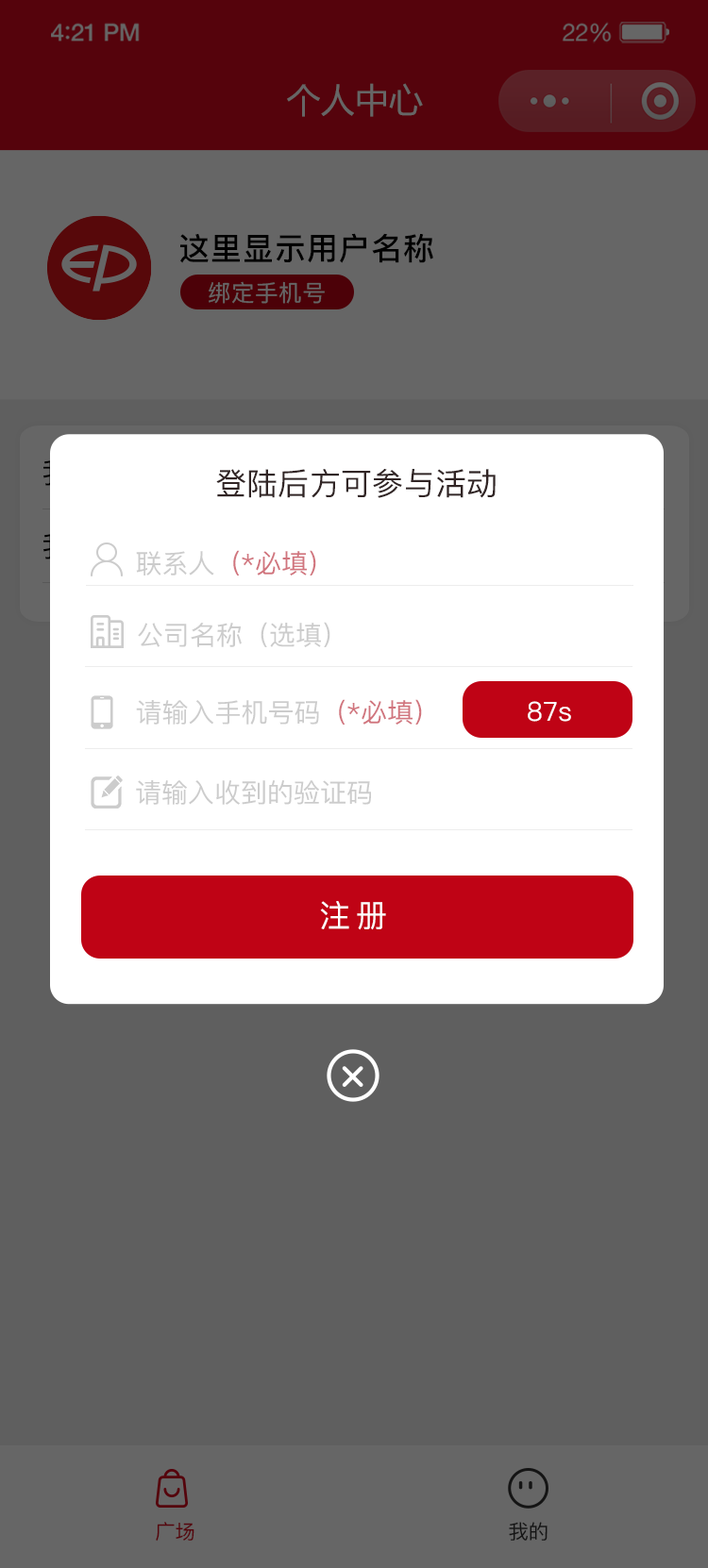
<style>
.page{position:relative;width:708px;height:1568px;background:#5f5f5f}
.page>*{position:absolute;margin:0}
.t1{font:34.1px "MicrosoftYaHei";color:#666666}
.t2{font:31.1px "PingFang-SC-Bold";letter-spacing:0.031em;color:#000000}
.t3{font:23px "PingFang-SC-Medium";letter-spacing:0.031em;color:#666666}
.t4{font:31.1px "PingFang-SC-Medium";letter-spacing:0.01em;color:#312525}
.t5{font:26.4px "PingFang-SC-Medium";color:#d1757e}
.t6{font:26.4px "PingFang-SC-Medium";color:#cccccc}
.t7{font:26.4px "PingFang-SC-Medium";color:#ffffff}
.t8{font:31.1px "PingFang-SC-Medium";letter-spacing:0.2em;color:#ffffff}
.t9{font:20.2px "PingFang-SC-Medium";color:#55040c}
.t10{font:20.2px "PingFang-SC-Medium";color:#141414}
</style>
<div class="page">
<p class="t1" style="left:287px;top:83px;width:136px;height:34px">个人中心</p>
<p class="t2" style="left:180px;top:233px;width:253px;height:30px">这里显示用户名称</p>
<p class="t3" style="left:209px;top:281px;width:116px;height:23px">绑定手机号</p>
<p class="t4" style="left:216px;top:469px;width:279px;height:29px">登陆后方可参与活动</p>
<p class="t5" style="left:136px;top:550px;width:180px;height:25px"><span class="t6">联系人</span>（*必填）</p>
<p class="t6" style="left:138px;top:622px;width:192px;height:25px">公司名称（选填）</p>
<p class="t6" style="left:136px;top:699px;width:286px;height:26px">请输入手机号码<span class="t5">（*必填）</span></p>
<p class="t7" style="left:527px;top:701px;width:44px;height:21px">87s</p>
<p class="t6" style="left:136px;top:780px;width:235px;height:25px">请输入收到的验证码</p>
<p class="t8" style="left:320px;top:901px;width:66px;height:29px">注册</p>
<p class="t9" style="left:156px;top:1522px;width:38px;height:20px">广场</p>
<p class="t10" style="left:509px;top:1522px;width:38px;height:19px">我的</p>
</div>
